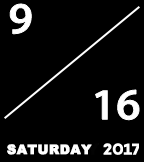
<style>
.page{position:relative;width:144px;height:162px;background:#000000}
.page>*{position:absolute;margin:0}
.t1{font:37.5px "AdobeHeitiStd-Regular";color:#ffffff;font-weight:bold;scale:1.14 1}
.t2{font:37px "AdobeHeitiStd-Regular";color:#ffffff;font-weight:bold;scale:1.14 1}
.t3{font:13px "Arial-Black";letter-spacing:0.02em;color:#ffffff;font-weight:bold}
</style>
<div class="page">
<p class="t1" style="left:10px;top:4px;width:22px;height:30px">9</p>
<p class="t2" style="left:95px;top:90px;width:44px;height:30px">1<span class="t1">6</span></p>
<p class="t3" style="left:7px;top:144px;width:85px;height:11px">SATURDAY</p>
</div>
